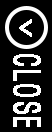
<style>
.page{position:relative;width:52px;height:132px;background:#000000}
.page>*{position:absolute;margin:0}
.t1{font:37.3px "MalgunGothic";color:#ffffff;font-weight:bold;scale:0.73 1}
.t2{font:32.6px "MoeumTR-HM";color:#ffffff;font-weight:bold;scale:0.71 1}
</style>
<div class="page">
<p class="t1" style="left:19px;top:19px;width:13px;height:18px;rotate:180deg">&gt;</p>
<p class="t2" style="left:13px;top:54px;width:28px;height:73px;rotate:90deg">CLOSE</p>
</div>
